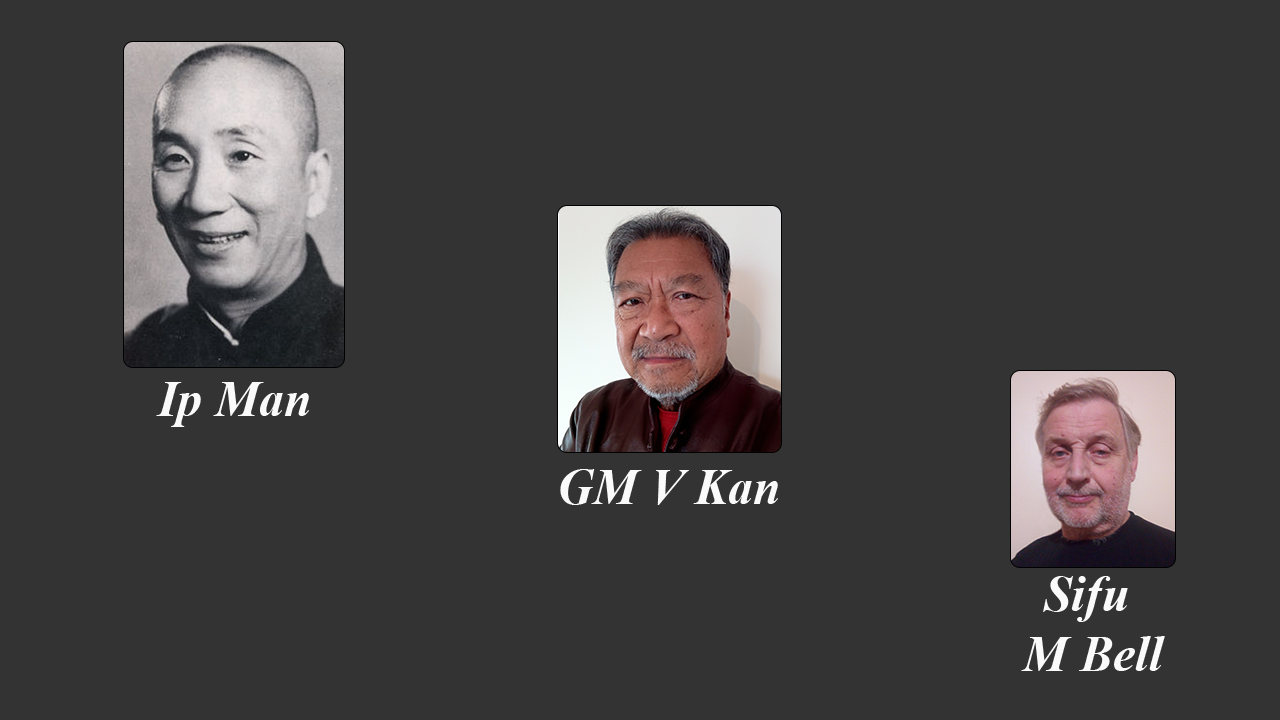
<style>
.page{position:relative;width:1280px;height:720px;background:#333333}
.page>*{position:absolute;margin:0}
.t1{font:50px "TimesNewRomanPS-BoldItalicMT";color:#fafafa}
</style>
<div class="page">
<p class="t1" style="left:156px;top:382px;width:153px;height:45px">Ip Man</p>
<p class="t1" style="left:560px;top:469px;width:218px;height:36px">GM V Kan</p>
<p class="t1" style="left:1021px;top:576px;width:144px;height:95px;text-align:center">Sifu <br>M Bell</p>
</div>
